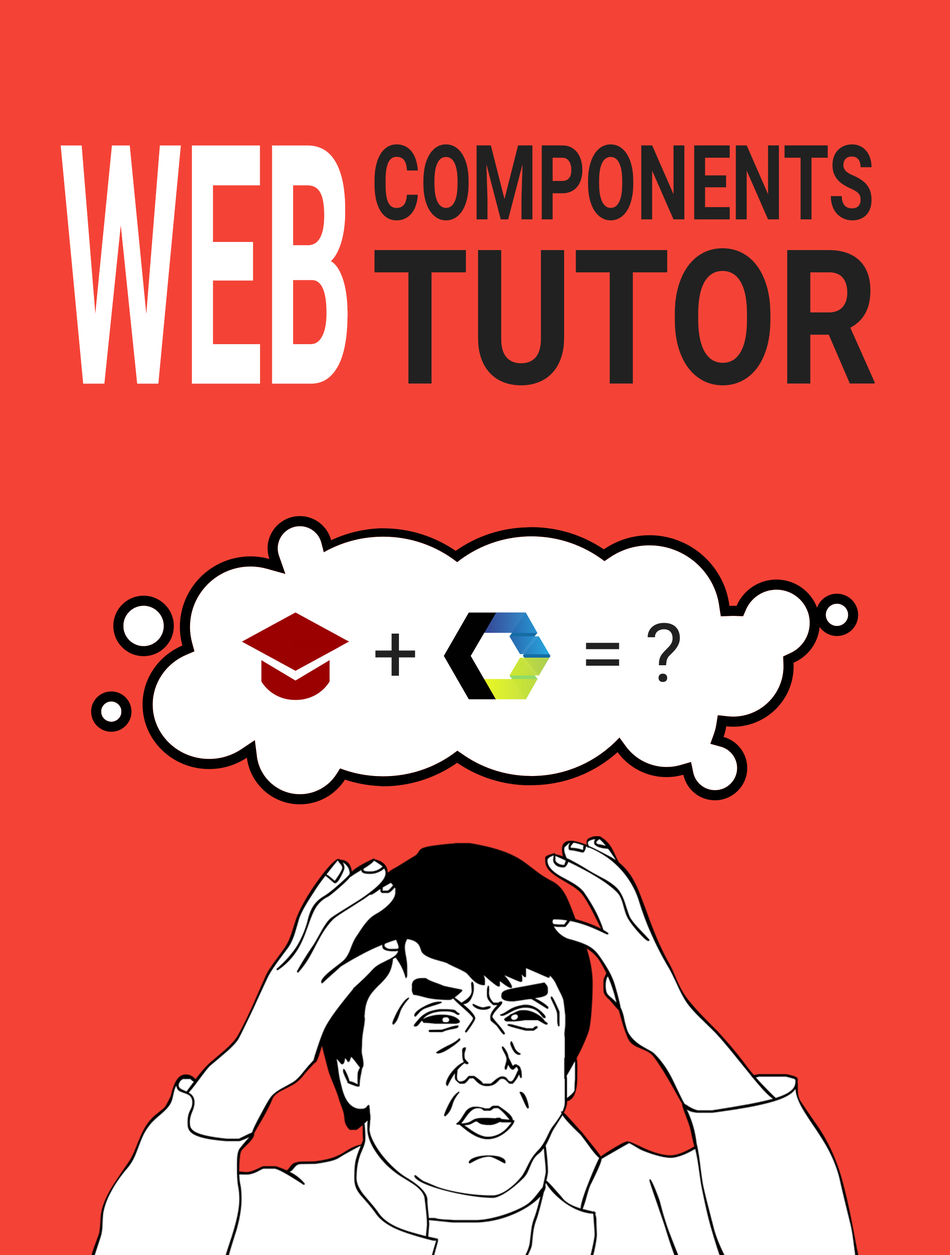
<style>
.page{position:relative;width:950px;height:1255px;background:#f44336}
.page>*{position:absolute;margin:0}
.t1{font:334.9px "Roboto-Bold";color:#ffffff;scale:0.43 1}
.t2{font:103.9px "Roboto-Bold";color:#212121;text-transform:uppercase;scale:0.72 1}
.t3{font:187.6px "Roboto-Bold";color:#212121;text-transform:uppercase;scale:0.84 1}
.t4{font:81.4px "Roboto-Regular";color:#212121;text-transform:uppercase}
</style>
<div class="page">
<p class="t1" style="left:61px;top:145px;width:287px;height:239px">WEB</p>
<p class="t2" style="left:374px;top:144px;width:498px;height:77px">Components</p>
<p class="t3" style="left:374px;top:248px;width:501px;height:138px">TUTOR</p>
<p class="t4" style="left:375px;top:623px;width:305px;height:59px">+        = ?</p>
</div>
